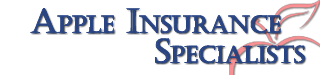
<style>
.page{position:relative;width:320px;height:75px;background:#ffffff}
.page>*{position:absolute;margin:0}
.t1{font:33.3px "Castellar";color:#284483;font-variant:small-caps}
.t2{font:32.9px "Castellar";color:#284483;font-variant:small-caps}
</style>
<div class="page">
<p class="t1" style="left:30px;top:8px;width:251px;height:25px">Apple Insurance</p>
<p class="t2" style="left:155px;top:38px;width:150px;height:25px">Specialists</p>
</div>
